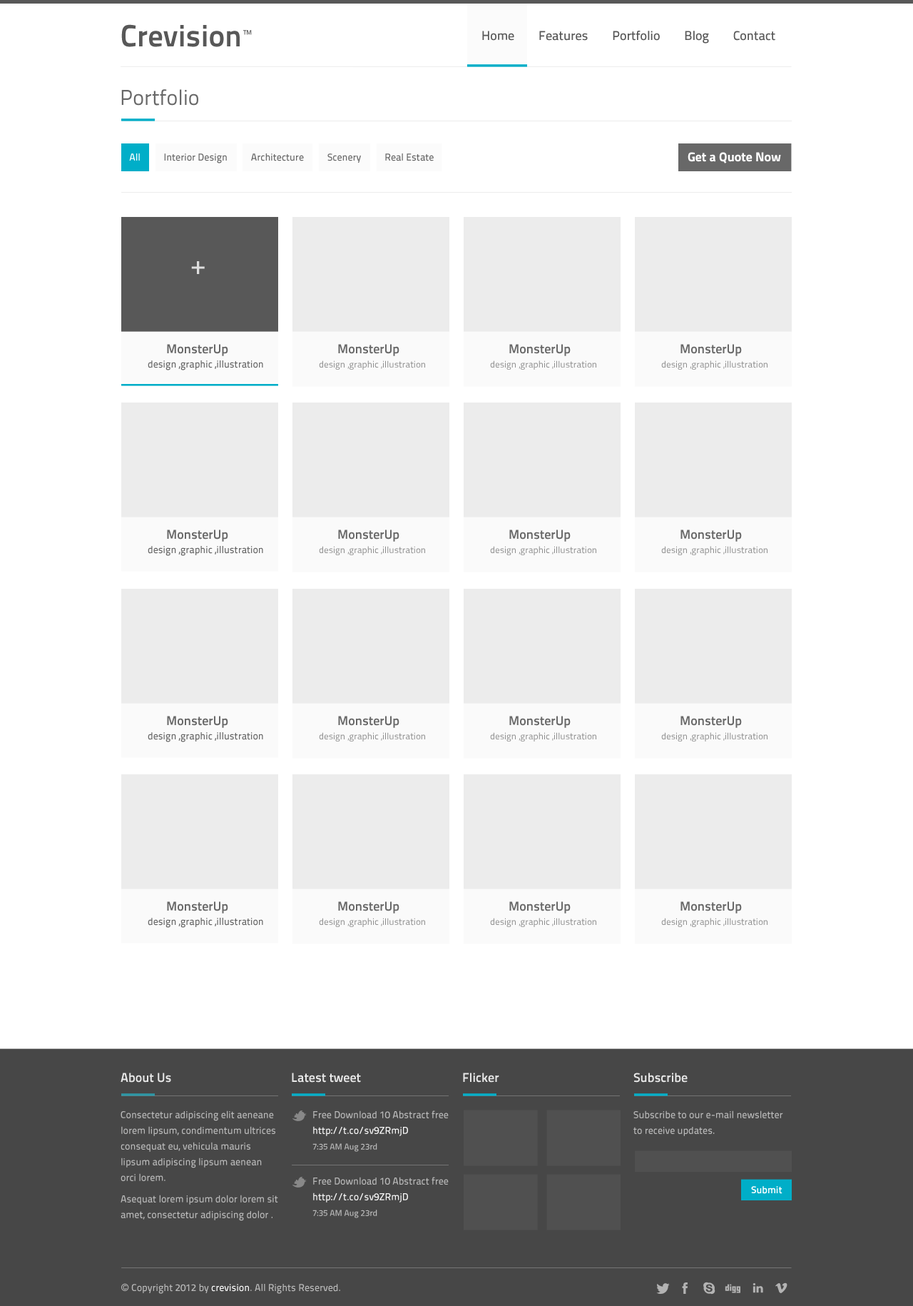
<style>
.page{position:relative;width:913px;height:1306px;background:#ffffff}
.page>*{position:absolute;margin:0}
.t1{font:12.8px "TitilliumText22L-Medium";color:#585858}
.t2{font:21.4px "TitilliumText22L-Regular";color:#686868}
.t3{font:10px "TitilliumText22L-Medium";color:#686868}
.t4{font:10px "TitilliumText22L-Medium";color:#ffffff}
.t5{font:12.8px "TitilliumText22L-XBold";color:#ffffff}
.t6{font:25.7px "TitilliumText22L-Medium";color:#dedede}
.t7{font:12.8px "TitilliumText22L-Bold";color:#686868}
.t8{font:9.3px "TitilliumText22L-Regular";color:#8c8c8c}
.t9{font:12.8px "TitilliumText22L-Bold";color:#e8e8e8}
.t10{font:10px/15.7px "TitilliumText22L-Medium";color:#b9b9b9}
.t11{font:10px/15.7px "TitilliumText22L-Medium";color:#fafafa}
.t12{font:8.6px/15.7px "TitilliumText22L-Medium";color:#b9b9b9}
.t13{font:10px "TitilliumText22L-Bold";color:#ffffff}
.t14{font:10px "TitilliumText22L-Medium";color:#b9b9b9}
.t15{font:10px "ArialMT";color:#b9b9b9}
.t16{font:10px "TitilliumText22L-Medium";color:#fafafa}
</style>
<div class="page">
<p class="t1" style="left:482px;top:31px;width:294px;height:13px">Home        Features        Portfolio        Blog        Contact</p>
<p class="t2" style="left:121px;top:89px;width:77px;height:17px">Portfolio</p>
<p class="t3" style="left:129px;top:153px;width:305px;height:10px"><span class="t4">All          </span>Interior Design          Architecture          Scenery          Real Estate</p>
<p class="t5" style="left:688px;top:152px;width:93px;height:11px">Get a Quote Now</p>
<p class="t6" style="left:191px;top:261px;width:14px;height:13px">+</p>
<p class="t7" style="left:167px;top:344px;width:61px;height:12px">MonsterUp</p>
<p class="t7" style="left:338px;top:344px;width:62px;height:12px">MonsterUp</p>
<p class="t7" style="left:509px;top:344px;width:62px;height:12px">MonsterUp</p>
<p class="t7" style="left:681px;top:344px;width:61px;height:12px">MonsterUp</p>
<p class="t3" style="left:148px;top:360px;width:115px;height:10px">design ,graphic ,illustration</p>
<p class="t8" style="left:319px;top:360px;width:106px;height:10px">design ,graphic ,illustration</p>
<p class="t8" style="left:490px;top:360px;width:106px;height:10px">design ,graphic ,illustration</p>
<p class="t8" style="left:661px;top:360px;width:107px;height:10px">design ,graphic ,illustration</p>
<p class="t7" style="left:167px;top:529px;width:61px;height:13px">MonsterUp</p>
<p class="t7" style="left:338px;top:529px;width:62px;height:13px">MonsterUp</p>
<p class="t7" style="left:509px;top:529px;width:62px;height:13px">MonsterUp</p>
<p class="t7" style="left:681px;top:529px;width:61px;height:13px">MonsterUp</p>
<p class="t3" style="left:148px;top:546px;width:115px;height:10px">design ,graphic ,illustration</p>
<p class="t8" style="left:319px;top:546px;width:106px;height:9px">design ,graphic ,illustration</p>
<p class="t8" style="left:490px;top:546px;width:106px;height:9px">design ,graphic ,illustration</p>
<p class="t8" style="left:661px;top:546px;width:107px;height:9px">design ,graphic ,illustration</p>
<p class="t7" style="left:167px;top:716px;width:61px;height:12px">MonsterUp</p>
<p class="t7" style="left:338px;top:716px;width:62px;height:12px">MonsterUp</p>
<p class="t7" style="left:509px;top:716px;width:62px;height:12px">MonsterUp</p>
<p class="t7" style="left:681px;top:716px;width:61px;height:12px">MonsterUp</p>
<p class="t3" style="left:148px;top:732px;width:115px;height:10px">design ,graphic ,illustration</p>
<p class="t8" style="left:319px;top:732px;width:106px;height:9px">design ,graphic ,illustration</p>
<p class="t8" style="left:490px;top:732px;width:106px;height:9px">design ,graphic ,illustration</p>
<p class="t8" style="left:661px;top:732px;width:107px;height:9px">design ,graphic ,illustration</p>
<p class="t7" style="left:167px;top:901px;width:61px;height:12px">MonsterUp</p>
<p class="t7" style="left:338px;top:901px;width:62px;height:12px">MonsterUp</p>
<p class="t7" style="left:509px;top:901px;width:62px;height:12px">MonsterUp</p>
<p class="t7" style="left:681px;top:901px;width:61px;height:12px">MonsterUp</p>
<p class="t3" style="left:148px;top:918px;width:115px;height:10px">design ,graphic ,illustration</p>
<p class="t8" style="left:319px;top:918px;width:106px;height:9px">design ,graphic ,illustration</p>
<p class="t8" style="left:490px;top:918px;width:106px;height:9px">design ,graphic ,illustration</p>
<p class="t8" style="left:661px;top:918px;width:107px;height:9px">design ,graphic ,illustration</p>
<p class="t9" style="left:121px;top:1072px;width:50px;height:10px">About Us</p>
<p class="t9" style="left:292px;top:1072px;width:69px;height:10px">Latest tweet</p>
<p class="t9" style="left:463px;top:1072px;width:36px;height:10px">Flicker</p>
<p class="t9" style="left:634px;top:1072px;width:54px;height:10px">Subscribe</p>
<p class="t10" style="left:121px;top:1110px;width:157px;height:111px">Consectetur adipiscing elit aeneane lorem lipsum, condimentum ultrices consequat eu, vehicula mauris lipsum adipiscing lipsum aenean orci lorem.<br><br>Asequat lorem ipsum dolor lorem sit amet, consectetur adipiscing dolor .</p>
<p class="t10" style="left:313px;top:1110px;width:136px;height:42px">Free Download 10 Abstract free<br><span class="t11">http://t.co/sv9ZRmjD <br></span><span class="t12">7:35 AM Aug 23rd</span></p>
<p class="t10" style="left:634px;top:1110px;width:149px;height:26px">Subscribe to our e-mail newsletter to receive updates.</p>
<p class="t10" style="left:313px;top:1177px;width:136px;height:41px">Free Download 10 Abstract free<br><span class="t11">http://t.co/sv9ZRmjD <br></span><span class="t12">7:35 AM Aug 23rd</span></p>
<p class="t13" style="left:751px;top:1186px;width:32px;height:8px">Submit</p>
<p class="t14" style="left:121px;top:1283px;width:219px;height:11px"><span class="t15">© </span>Copyright 2012 by <span class="t16">crevision</span>. All Rights Reserved.</p>
</div>
